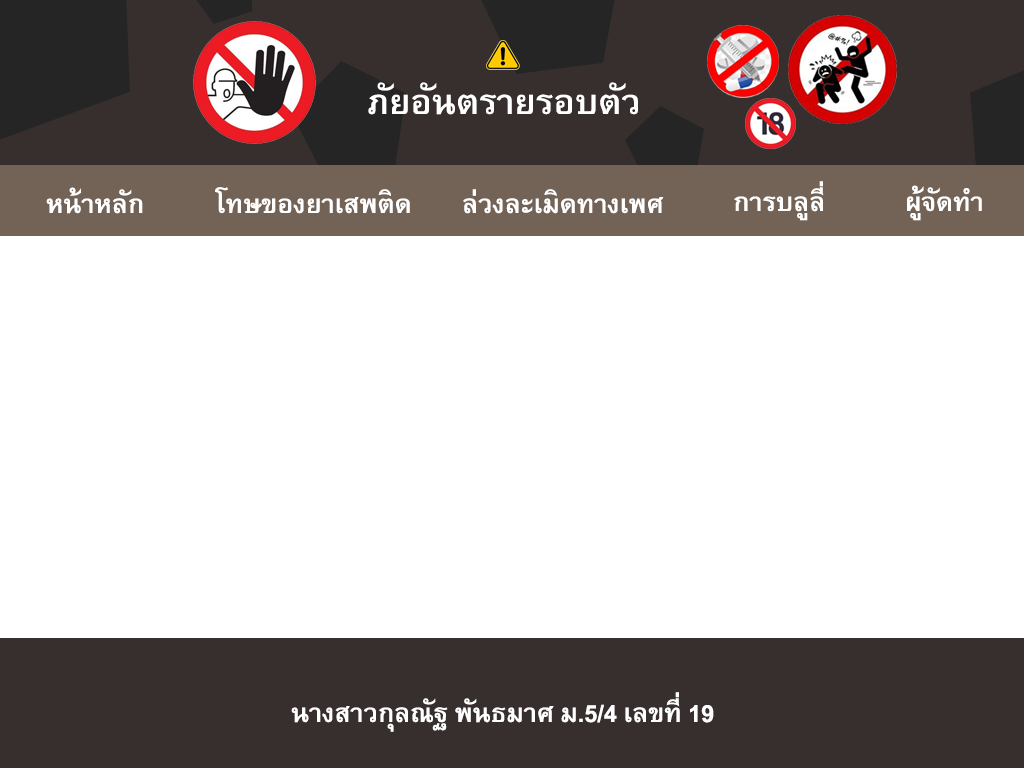
<style>
.page{position:relative;width:1024px;height:768px;background:#ffffff}
.page>*{position:absolute;margin:0}
.t1{font:48px "BrowalliaNew-Bold";color:#ffffff}
.t2{font:36px "BrowalliaNew-Bold";color:#ffffff}
</style>
<div class="page">
<p class="t1" style="left:368px;top:82px;width:270px;height:33px">ภัยอันตรายรอบตัว</p>
<p class="t2" style="left:734px;top:181px;width:90px;height:40px">การบลูลี่</p>
<p class="t2" style="left:907px;top:185px;width:75px;height:36px">ผู้จัดทำ</p>
<p class="t2" style="left:46px;top:187px;width:97px;height:27px">หน้าหลัก</p>
<p class="t2" style="left:215px;top:187px;width:195px;height:27px">โทษของยาเสพติด</p>
<p class="t2" style="left:463px;top:189px;width:201px;height:25px">ล่วงละเมิดทางเพศ</p>
<p class="t2" style="left:291px;top:692px;width:423px;height:40px">นางสาวกุลณัฐ พันธมาศ ม.5/4 เลขที่ 19</p>
</div>
